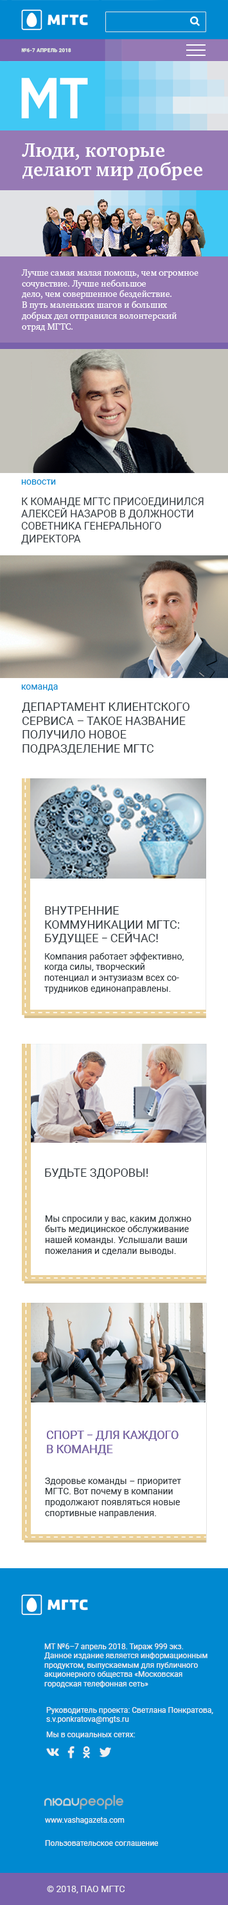
<style>
.page{position:relative;width:228px;height:1905px;background:#ffffff}
.page>*{position:absolute;margin:0}
.t1{font:5.1px "Roboto-Bold";letter-spacing:0.025em;color:#e7f2e4;text-transform:uppercase}
.t2{font:19.3px/19.3px "CharterC-Bold";color:#ffffff}
.t3{font:9px "CharterC";color:#ffffff}
.t4{font:9px "Roboto-Regular";color:#0089d0}
.t5{font:10.3px "Roboto-Regular";color:#2f363c;text-transform:uppercase}
.t6{font:11.6px "Roboto-Regular";color:#2f363c;text-transform:uppercase}
.t7{font:9px "Roboto-Regular";color:#2f363c}
.t8{font:7.7px "Roboto-Regular";color:#f0f0f0}
.t9{font:9px "Roboto-Regular";color:#f0f0f0}
</style>
<div class="page">
<p class="t1" style="left:21px;top:48px;width:50px;height:5px">№6-7 АПРЕЛЬ 2018</p>
<p class="t2" style="left:22px;top:143px;width:181px;height:38px">Люди, которые <br>делают мир добрее</p>
<p class="t3" style="left:21px;top:269px;width:178px;height:63px">Лучше самая малая помощь, чем огромное сочувствие. Лучше небольшое<br>дело, чем совершенное бездействие. <br>В путь маленьких шагов и больших<br>добрых дел отправился волонтерский <br>отряд МГТС.</p>
<p class="t4" style="left:21px;top:480px;width:35px;height:5px">новости</p>
<p class="t5" style="left:21px;top:498px;width:183px;height:46px">К команде МГТС присоединился <br>Алексей Назаров в должности <br>советника генерального <br>директора</p>
<p class="t4" style="left:21px;top:685px;width:37px;height:6px">команда</p>
<p class="t6" style="left:22px;top:703px;width:168px;height:52px">Департамент клиентского <br>сервиса – такое название <br>получило новое <br>подразделение МГТС</p>
<p class="t7" style="left:44px;top:953px;width:140px;height:41px">Компания работает эффективно, когда силы, творческий потенциал и энтузиазм всех со-<br>трудников единонаправлены.</p>
<p class="t6" style="left:45px;top:1169px;width:103px;height:10px">БУДЬТЕ ЗДОРОВЫ!</p>
<p class="t7" style="left:45px;top:1216px;width:147px;height:40px">Мы спросили у вас, каким должно быть медицинское обслуживание нашей команды. Услышали ваши пожелания и сделали выводы.</p>
<p class="t7" style="left:45px;top:1478px;width:136px;height:40px">Здоровье команды – приоритет МГТС. Вот почему в компании продолжают появляться новые<br>спортивные направления.</p>
<p class="t8" style="left:44px;top:1644px;width:164px;height:44px">МТ №6–7 апрель 2018. Тираж 999 экз.<br>Данное издание является информационным<br>продуктом, выпускаемым для публичного<br>акционерного общества «Московская<br>городская телефонная сеть»</p>
<p class="t8" style="left:46px;top:1707px;width:167px;height:17px">Руководитель проекта: Светлана Понкратова,<br>s.v.ponkratova@mgts.ru</p>
<p class="t8" style="left:46px;top:1732px;width:90px;height:7px">Мы в социальных сетях:</p>
<p class="t8" style="left:45px;top:1817px;width:80px;height:7px">www.vashagazeta.com</p>
<p class="t8" style="left:45px;top:1841px;width:114px;height:5px">Пользовательское соглашение</p>
<p class="t9" style="left:47px;top:1886px;width:78px;height:8px">© 2018, ПАО МГТС</p>
</div>
